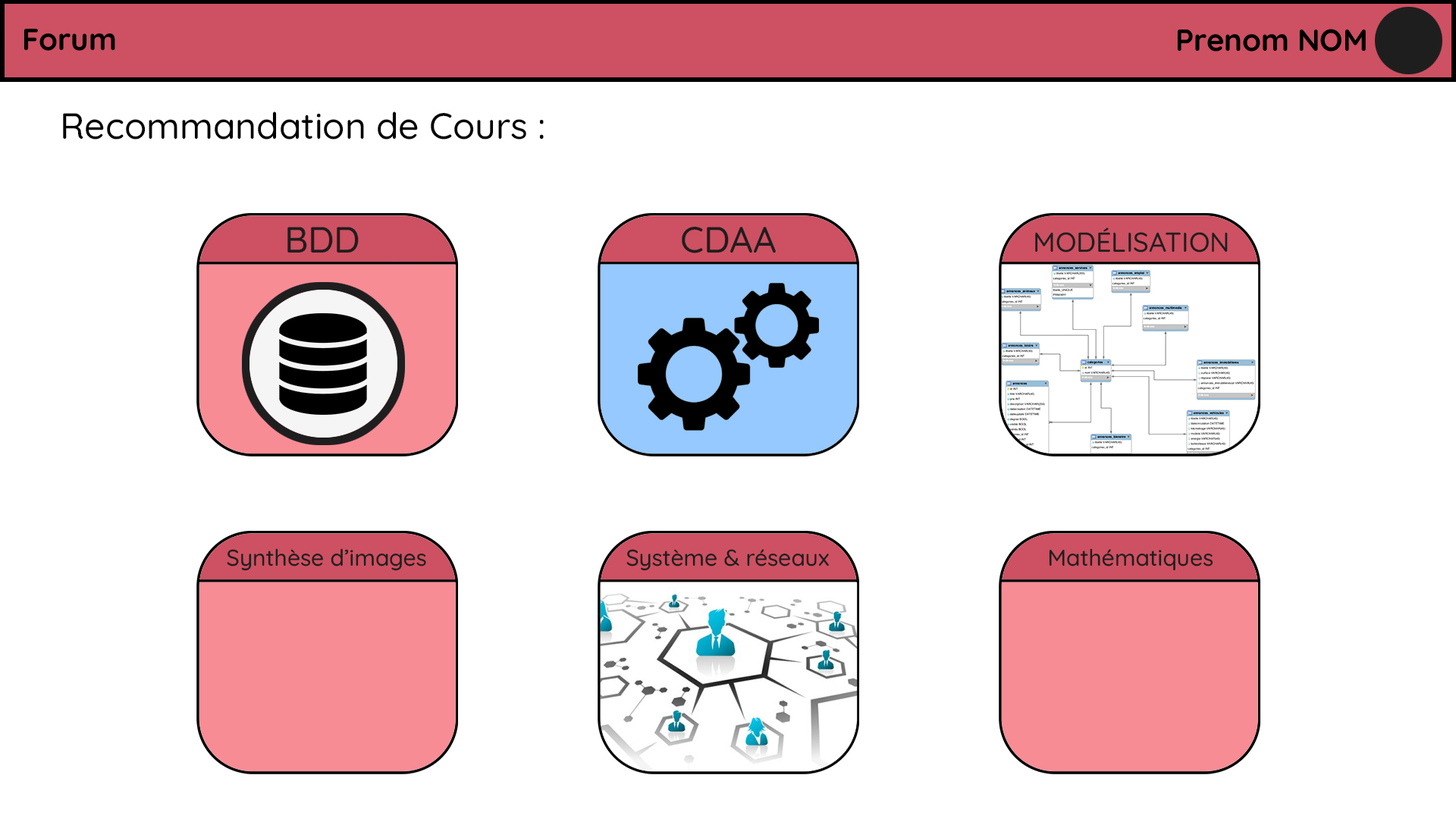
<style>
.page{position:relative;width:1456px;height:819px;background:#ffffff}
.page>*{position:absolute;margin:0}
.t1{font:36.4px "Quicksand-Medium";color:#000000}
.t2{font:36.4px "Quicksand-Medium";color:#1f1e1f}
.t3{font:27.3px "Quicksand-Medium";color:#1f1e1f}
.t4{font:22.7px "Quicksand-Medium";color:#1f1e1f}
</style>
<div class="page">
<p class="t1" style="left:63px;top:111px;width:481px;height:29px">Recommandation de Cours :</p>
<p class="t2" style="left:287px;top:227px;width:72px;height:26px">BDD</p>
<p class="t2" style="left:682px;top:226px;width:94px;height:27px">CDAA</p>
<p class="t3" style="left:1035px;top:227px;width:193px;height:26px">MODÉLISATION</p>
<p class="t4" style="left:227px;top:548px;width:199px;height:23px">Synthèse d’images</p>
<p class="t4" style="left:626px;top:549px;width:203px;height:22px">Système &amp; réseaux</p>
<p class="t4" style="left:1049px;top:548px;width:164px;height:23px">Mathématiques</p>
</div>
